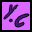
<style>
.page{position:relative;width:32px;height:32px;background:#da69ff}
.page>*{position:absolute;margin:0}
.t1{font:13.1px "TrueLies";letter-spacing:-0.06em;color:#4d1a80;scale:0.96 1}
.t2{font:11.1px "TrueLies";letter-spacing:-0.06em;color:#4d1a80;scale:1.1 1}
</style>
<div class="page">
<p class="t1" style="left:4px;top:5px;width:14px;height:14px">Y</p>
<p class="t2" style="left:15px;top:14px;width:14px;height:13px;rotate:-1deg">C</p>
</div>
